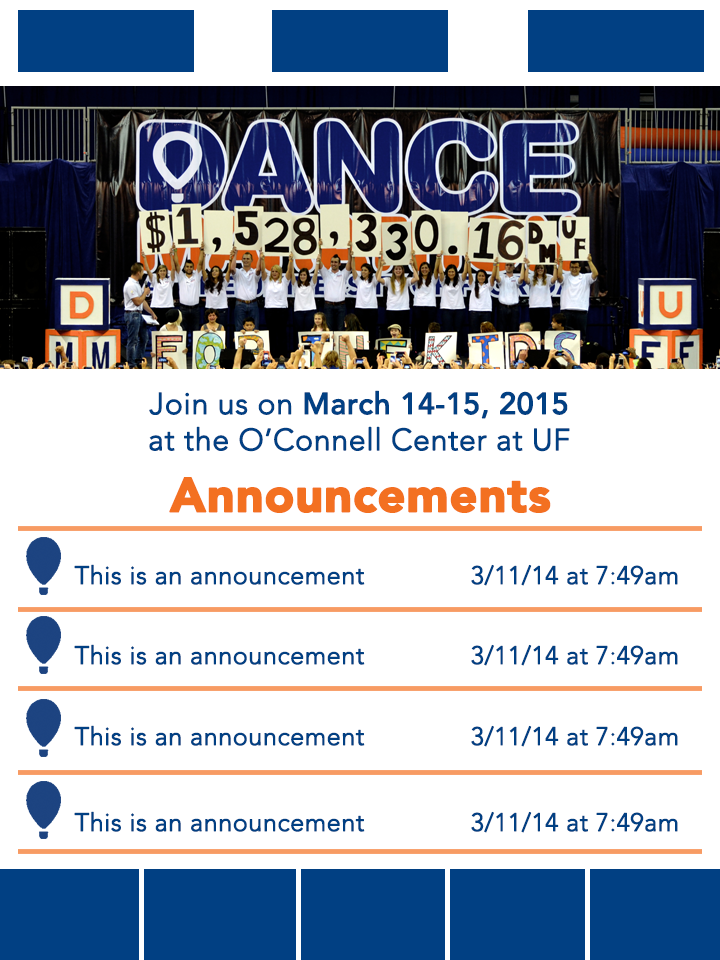
<style>
.page{position:relative;width:720px;height:960px;background:#ffffff}
.page>*{position:absolute;margin:0}
.t1{font:30.1px "AvenirLTStd-Light";color:#014083;font-weight:bold}
.t2{font:30.1px/43px "AvenirLTStd-Light";color:#014083;font-weight:bold}
.t3{font:30.1px/43px "AvenirLTStd-Medium";color:#014083;font-weight:bold}
.t4{font:48.1px "AvenirLTStd-Black";color:#f37021;font-weight:bold}
.t5{font:25px "AvenirLTStd-Light";color:#014083;font-weight:bold}
</style>
<div class="page">
<p class="t1" style="left:149px;top:390px;width:421px;height:62px;text-align:center"><span class="t2">Join us on </span><span class="t3">March 14-15, 2015 <br></span>at the O’Connell Center at UF</p>
<p class="t4" style="left:169px;top:477px;width:382px;height:36px">Announcements</p>
<p class="t5" style="left:74px;top:564px;width:604px;height:22px">This is an announcement   3/11/14 at 7:49am</p>
<p class="t5" style="left:74px;top:644px;width:604px;height:22px">This is an announcement   3/11/14 at 7:49am</p>
<p class="t5" style="left:74px;top:725px;width:604px;height:22px">This is an announcement   3/11/14 at 7:49am</p>
<p class="t5" style="left:74px;top:811px;width:604px;height:22px">This is an announcement   3/11/14 at 7:49am</p>
</div>
